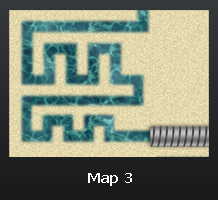
<style>
.page{position:relative;width:218px;height:200px}
.page>*{position:absolute;margin:0}
.t1{font:14px "Tahoma";color:#ffffff;scale:1.23 1}
</style>
<div class="page">
<p class="t1" style="left:88px;top:173px;width:44px;height:13px">Map 3</p>
</div>
